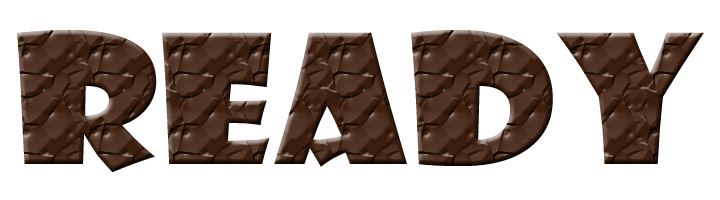
<style>
.page{position:relative;width:720px;height:200px;background:#ffffff}
.page>*{position:absolute;margin:0}
.t1{font:175.2px "ShowcardGothic-Reg";color:#3f200f;scale:1.21 1}
</style>
<div class="page">
<p class="t1" style="left:17px;top:29px;width:687px;height:143px">Ready</p>
</div>
